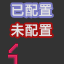
<style>
.page{position:relative;width:64px;height:64px;background:#333333}
.page>*{position:absolute;margin:0}
.t1{font:14px "FZLTHProGlobal-Demibold";letter-spacing:0.005em;color:#e2e2e2}
</style>
<div class="page">
<p class="t1" style="left:12px;top:4px;width:40px;height:13px">已配置</p>
<p class="t1" style="left:11px;top:23px;width:41px;height:14px">未配置</p>
</div>
